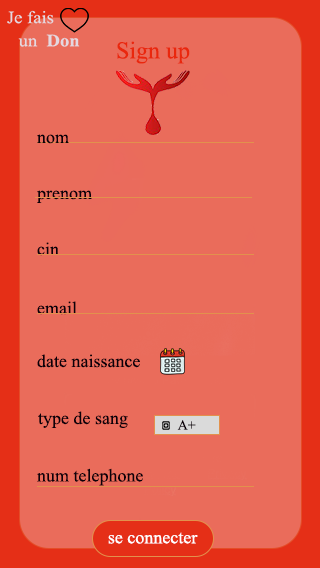
<style>
.page{position:relative;width:320px;height:568px;background:#ea6c5b}
.page>*{position:absolute;margin:0}
.t1{font:24px "TimesNewRomanPSMT";color:#ea270d}
.t2{font:18px "TimesNewRomanPSMT";color:#e52f17}
.t3{font:18px "TimesNewRomanPSMT";color:#0c0109}
.t4{font:14px "TimesNewRomanPSMT";color:#0c0109}
.t5{font:18px "TimesNewRomanPSMT";color:#ffffff}
.t6{font:14px "TimesNewRomanPSMT";color:#ffffff}
</style>
<div class="page">
<p class="t1" style="left:117px;top:41px;width:73px;height:23px"><span class="t2"><br></span>Sign up</p>
<p class="t3" style="left:37px;top:134px;width:32px;height:10px">nom</p>
<p class="t3" style="left:37px;top:190px;width:55px;height:13px">prenom</p>
<p class="t3" style="left:37px;top:242px;width:22px;height:14px">cin</p>
<p class="t3" style="left:37px;top:301px;width:40px;height:14px">email</p>
<p class="t3" style="left:37px;top:354px;width:103px;height:14px">date naissance</p>
<p class="t3" style="left:38px;top:411px;width:90px;height:17px">type de sang</p>
<p class="t4" style="left:177px;top:420px;width:19px;height:10px">A+</p>
<p class="t3" style="left:37px;top:468px;width:106px;height:18px">num telephone</p>
<p class="t5" style="left:108px;top:532px;width:90px;height:12px"><span class="t6"><br></span>se connecter</p>
</div>
